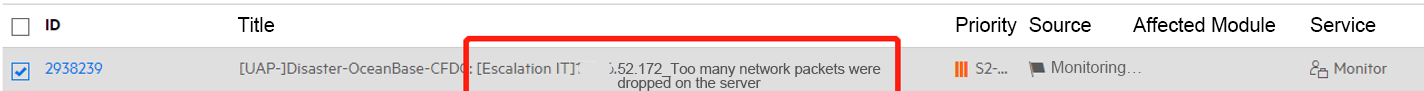
<style>
.page{position:relative;width:1424px;height:91px;background:#ffffff}
.page>*{position:absolute;margin:0}
.t1{font:19.8px "ArialMT";color:#000000}
.t2{font:14.6px/14.8px "ArialMT";color:#575655}
.t3{font:16.1px "ArialMT";color:#656465}
</style>
<div class="page">
<p class="t1" style="left:237px;top:17px;width:38px;height:15px">Title</p>
<p class="t1" style="left:956px;top:17px;width:61px;height:19px">Priority</p>
<p class="t1" style="left:1029px;top:17px;width:62px;height:15px">Source</p>
<p class="t1" style="left:1133px;top:17px;width:143px;height:15px">Affected Module</p>
<p class="t1" style="left:1310px;top:17px;width:66px;height:15px">Service</p>
<p class="t2" style="left:617px;top:63px;width:264px;height:28px">52.172_Too many network packets were<br>dropped on the server</p>
<p class="t3" style="left:1052px;top:61px;width:89px;height:15px">Monitoring…</p>
</div>
